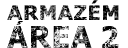
<style>
.page{position:relative;width:128px;height:48px;background:#ffffff}
.page>*{position:absolute;margin:0}
.t1{font:20px "Verdana-Bold";font-weight:bold}
.t2{font:29.5px "Verdana-Bold";letter-spacing:-0.06em;font-weight:bold}
</style>
<div class="page">
<p class="t1" style="left:7px;top:0px;width:112px;height:20px">ARMAZÉM</p>
<p class="t2" style="left:7px;top:25px;width:112px;height:23px">AREA 2</p>
</div>
